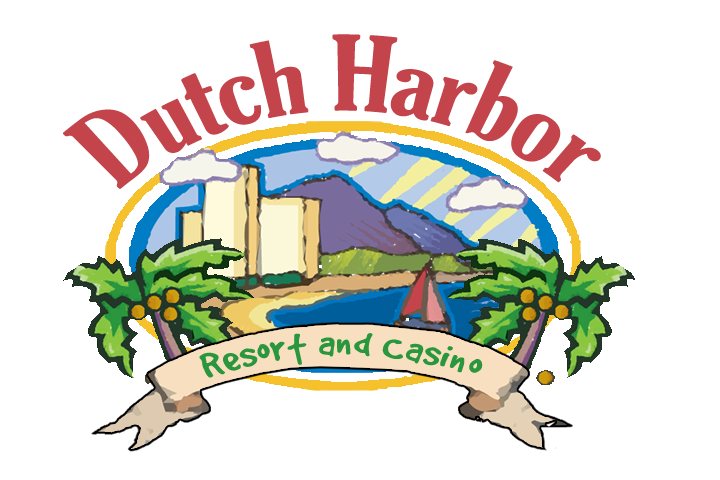
<style>
.page{position:relative;width:720px;height:480px;background:#ffffff}
.page>*{position:absolute;margin:0}
.t1{font:100px "GloucesterMT-ExtraCondensed";color:#c4444c;scale:1.11 1}
.t2{font:40px "GoodDogPlain";letter-spacing:0.025em;color:#2a963d;scale:1.11 1}
</style>
<div class="page">
<p class="t1" style="left:63px;top:34px;width:538px;height:155px">Dutch Harbor</p>
<p class="t2" style="left:199px;top:333px;width:284px;height:45px">Resort and Casino</p>
</div>
